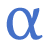
<style>
.page{position:relative;width:48px;height:48px;background:#ffffff}
.page>*{position:absolute;margin:0}
.t1{font:72px "Athelas-Regular";color:#4470c8}
</style>
<div class="page">
<p class="t1" style="left:6px;top:7px;width:37px;height:33px">α</p>
</div>
